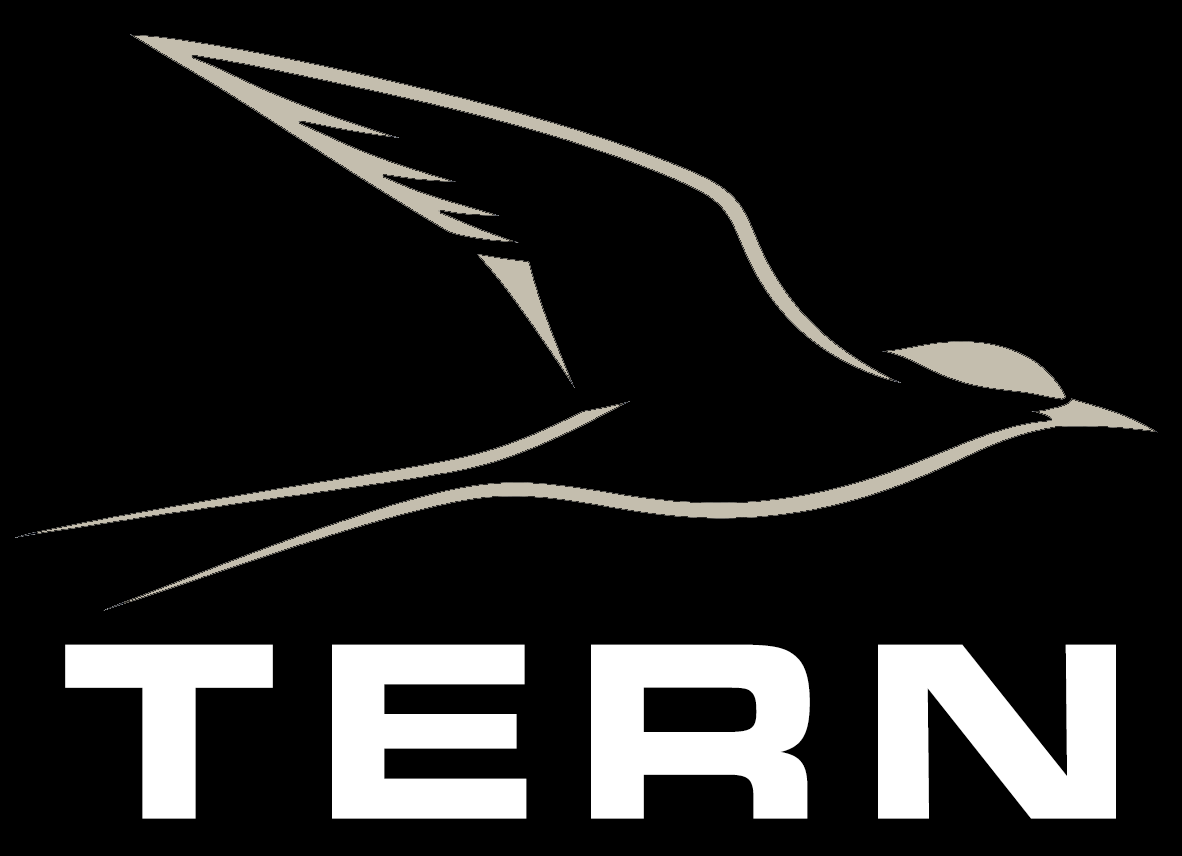
<style>
.page{position:relative;width:1182px;height:856px;background:#000000}
.page>*{position:absolute;margin:0}
.t1{font:260px "EurostileExt-Bla";letter-spacing:0.1em;color:#ffffff}
</style>
<div class="page">
<p class="t1" style="left:65px;top:644px;width:1051px;height:175px">TERN</p>
</div>
